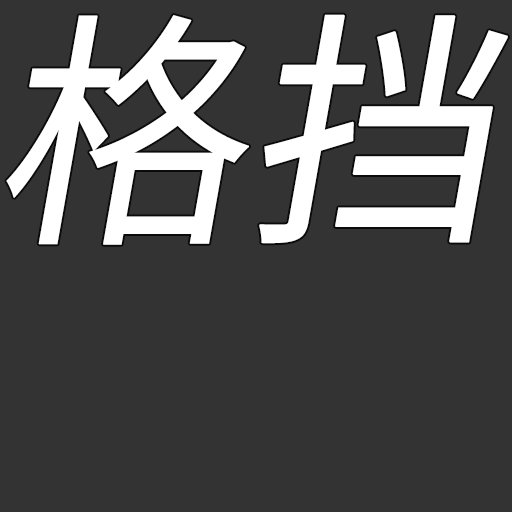
<style>
.page{position:relative;width:512px;height:512px;background:#333333}
.page>*{position:absolute;margin:0}
.t1{font:248px "SourceHanSansCN-Regular";letter-spacing:-0.05em;color:#ffffff;font-weight:bold;font-style:italic}
</style>
<div class="page">
<p class="t1" style="left:6px;top:15px;width:243px;height:230px">格</p>
<p class="t1" style="left:259px;top:14px;width:249px;height:230px">挡</p>
</div>
